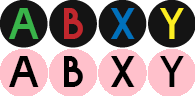
<style>
.page{position:relative;width:196px;height:97px;background:#ffc0cb}
.page>*{position:absolute;margin:0}
.t1{font:61.4px "BOLDE";color:#39b54a}
.t2{font:61.4px "BOLDE";color:#c1272d}
.t3{font:61.4px "BOLDE";color:#0071bc}
.t4{font:61.4px "BOLDE";color:#fcee21}
.t5{font:61.4px "BOLDE";color:#000000}
</style>
<div class="page">
<p class="t1" style="left:9px;top:8px;width:30px;height:31px">A</p>
<p class="t2" style="left:64px;top:8px;width:19px;height:31px">B</p>
<p class="t3" style="left:111px;top:8px;width:24px;height:31px">X</p>
<p class="t4" style="left:160px;top:8px;width:24px;height:31px">Y</p>
<p class="t5" style="left:9px;top:56px;width:30px;height:31px">A</p>
<p class="t5" style="left:64px;top:56px;width:19px;height:31px">B</p>
<p class="t5" style="left:111px;top:56px;width:24px;height:31px">X</p>
<p class="t5" style="left:160px;top:56px;width:24px;height:31px">Y</p>
</div>
